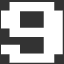
<style>
.page{position:relative;width:64px;height:64px;background:#ffffff}
.page>*{position:absolute;margin:0}
.t1{font:60px "Barcade-Brawl";color:#ffffff;font-weight:bold}
</style>
<div class="page">
<p class="t1" style="left:1px;top:2px;width:62px;height:61px">9</p>
</div>
